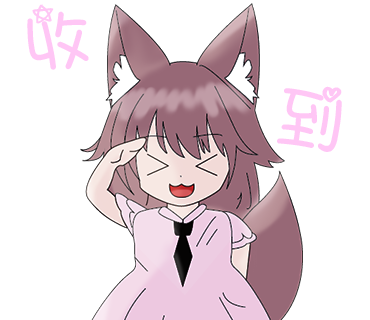
<style>
.page{position:relative;width:370px;height:320px;background:#ffffff}
.page>*{position:absolute;margin:0}
.t1{font:74.3px "ARTianniuB5-Bold";letter-spacing:-0.04em;color:#ffc6f5}
</style>
<div class="page">
<p class="t1" style="left:27px;top:4px;width:62px;height:66px;rotate:-8deg">收</p>
<p class="t1" style="left:277px;top:86px;width:65px;height:66px;rotate:10deg">到</p>
</div>
